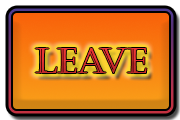
<style>
.page{position:relative;width:180px;height:120px}
.page>*{position:absolute;margin:0}
.t1{font:34.6px "Castellar"}
.t2{font:34.6px "PerpetuaTitlingMT-Bold";scale:0.6 1}
</style>
<div class="page">
<p class="t1" style="left:35px;top:48px;width:112px;height:25px"><span class="t2"><br></span>Leave</p>
</div>
